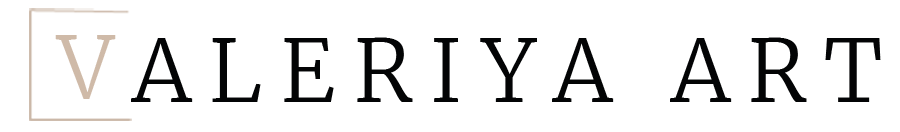
<style>
.page{position:relative;width:900px;height:132px;background:#ffffff}
.page>*{position:absolute;margin:0}
.t1{font:85.6px "MerriweatherLight";letter-spacing:0.2em;color:#cfbaa8}
.t2{font:85.6px "MerriweatherLight";letter-spacing:0.2em;color:#030405}
</style>
<div class="page">
<p class="t1" style="left:55px;top:35px;width:61px;height:64px">V</p>
<p class="t2" style="left:131px;top:37px;width:750px;height:65px">ALERIYA ART</p>
</div>
